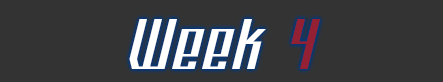
<style>
.page{position:relative;width:443px;height:82px;background:#333333}
.page>*{position:absolute;margin:0}
.t1{font:80px "PlatformEight";color:#ffffff}
.t2{font:80px "PlatformEight";color:#932033}
</style>
<div class="page">
<p class="t1" style="left:129px;top:19px;width:191px;height:50px">Week <span class="t2">4</span></p>
</div>
